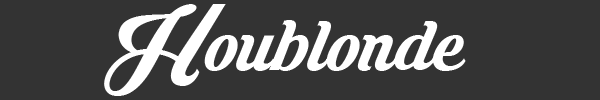
<style>
.page{position:relative;width:600px;height:100px;background:#333333}
.page>*{position:absolute;margin:0}
.t1{font:90px "KrinkesDecorPERSONALUSE";color:#ffffff}
</style>
<div class="page">
<p class="t1" style="left:104px;top:4px;width:362px;height:92px">Houblonde</p>
</div>
